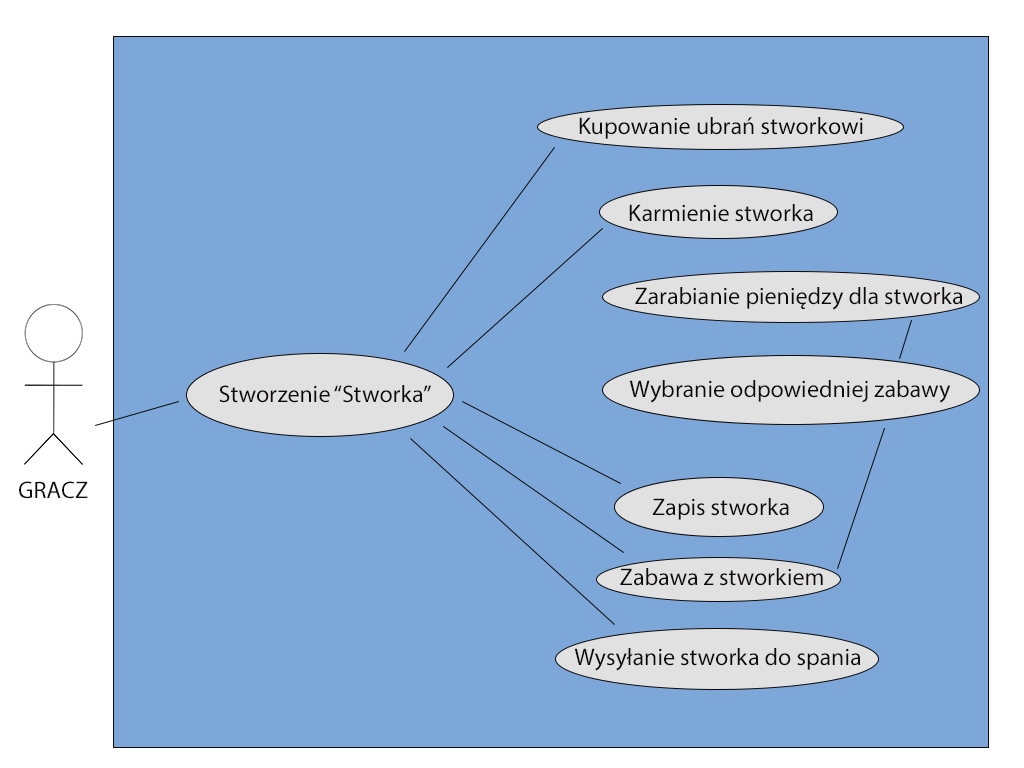
<style>
.page{position:relative;width:1024px;height:768px;background:#7da7d9}
.page>*{position:absolute;margin:0}
.t1{font:24px "MyriadPro-Regular";color:#0c0a0a}
</style>
<div class="page">
<p class="t1" style="left:579px;top:117px;width:284px;height:22px">Kupowanie ubrań stworkowi</p>
<p class="t1" style="left:629px;top:204px;width:184px;height:18px">Karmienie stworka</p>
<p class="t1" style="left:635px;top:287px;width:328px;height:23px">Zarabianie pieniędzy dla stworka</p>
<p class="t1" style="left:219px;top:385px;width:212px;height:18px">Stworzenie “Stworka”</p>
<p class="t1" style="left:629px;top:380px;width:322px;height:23px">Wybranie odpowiedniej zabawy</p>
<p class="t1" style="left:19px;top:481px;width:69px;height:18px">GRACZ</p>
<p class="t1" style="left:652px;top:498px;width:137px;height:22px">Zapis stworka</p>
<p class="t1" style="left:620px;top:568px;width:203px;height:18px">Zabawa z stworkiem</p>
<p class="t1" style="left:574px;top:648px;width:287px;height:23px">Wysyłanie stworka do spania</p>
</div>
